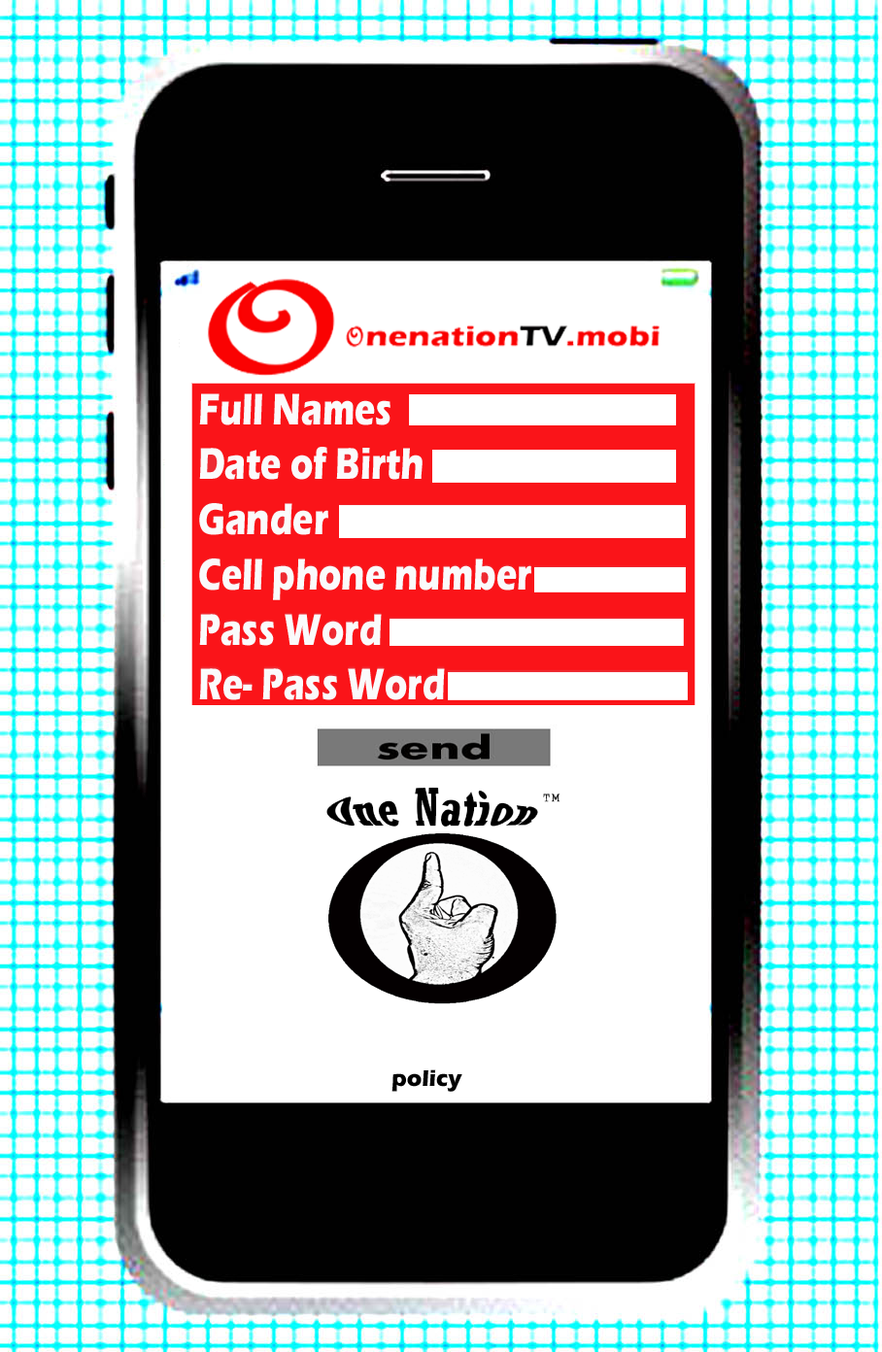
<style>
.page{position:relative;width:882px;height:1352px;background:#ffffff}
.page>*{position:absolute;margin:0}
.t1{font:45.9px "ErasITC-Bold";color:#fafafb;scale:0.76 1}
.t2{font:23.2px "ErasITC-Bold";color:#000000}
</style>
<div class="page">
<p class="t1" style="left:199px;top:393px;width:332px;height:307px">Full Names<br>Date of Birth<br>Gander <br>Cell phone number<br>Pass Word<br>Re- Pass Word</p>
<p class="t2" style="left:391px;top:1069px;width:71px;height:23px">policy</p>
</div>
